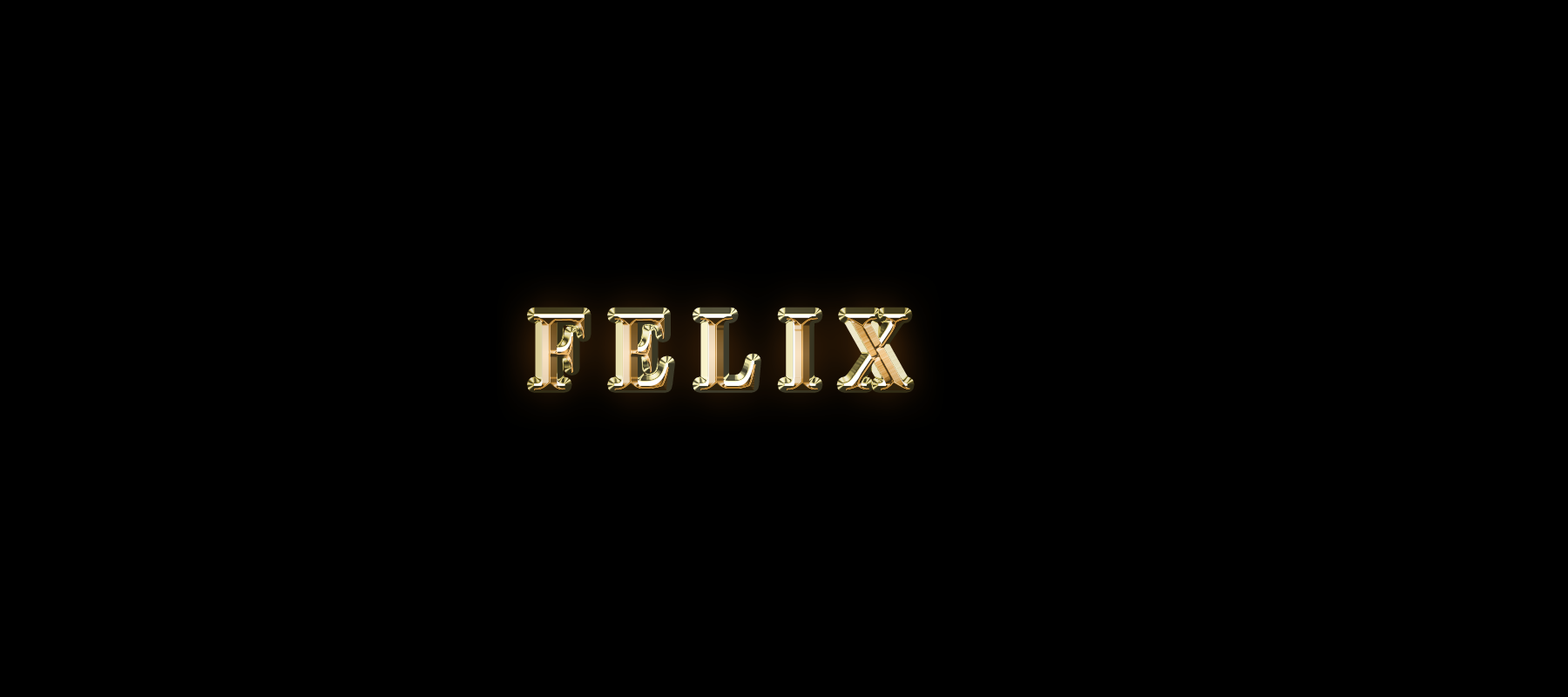
<style>
.page{position:relative;width:1568px;height:697px;background:#000000}
.page>*{position:absolute;margin:0}
.t1{font:107.5px "TimesNewRomanPS-BoldMT";letter-spacing:0.29em;scale:0.83 1}
.t2{font:109px "TimesNewRomanPS-BoldMT";letter-spacing:0.29em;scale:0.82 1}
</style>
<div class="page">
<p class="t1" style="left:534px;top:314px;width:374px;height:72px">FELIX</p>
<p class="t2" style="left:534px;top:317px;width:376px;height:73px">FELIX</p>
</div>
